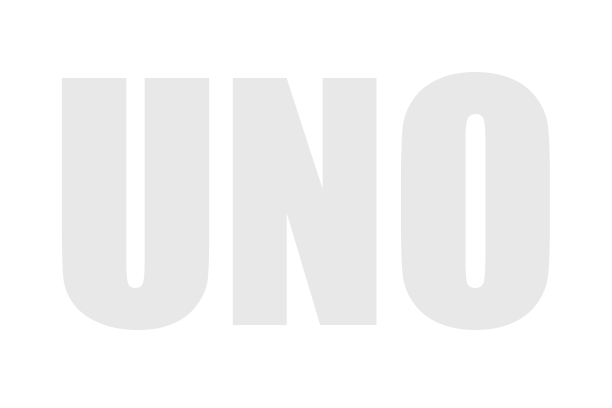
<style>
.page{position:relative;width:612px;height:408px;background:#ffffff}
.page>*{position:absolute;margin:0}
.t1{font:312.5px "Impact";color:#e9e8e8}
</style>
<div class="page">
<p class="t1" style="left:61px;top:71px;width:489px;height:259px">UNO</p>
</div>
